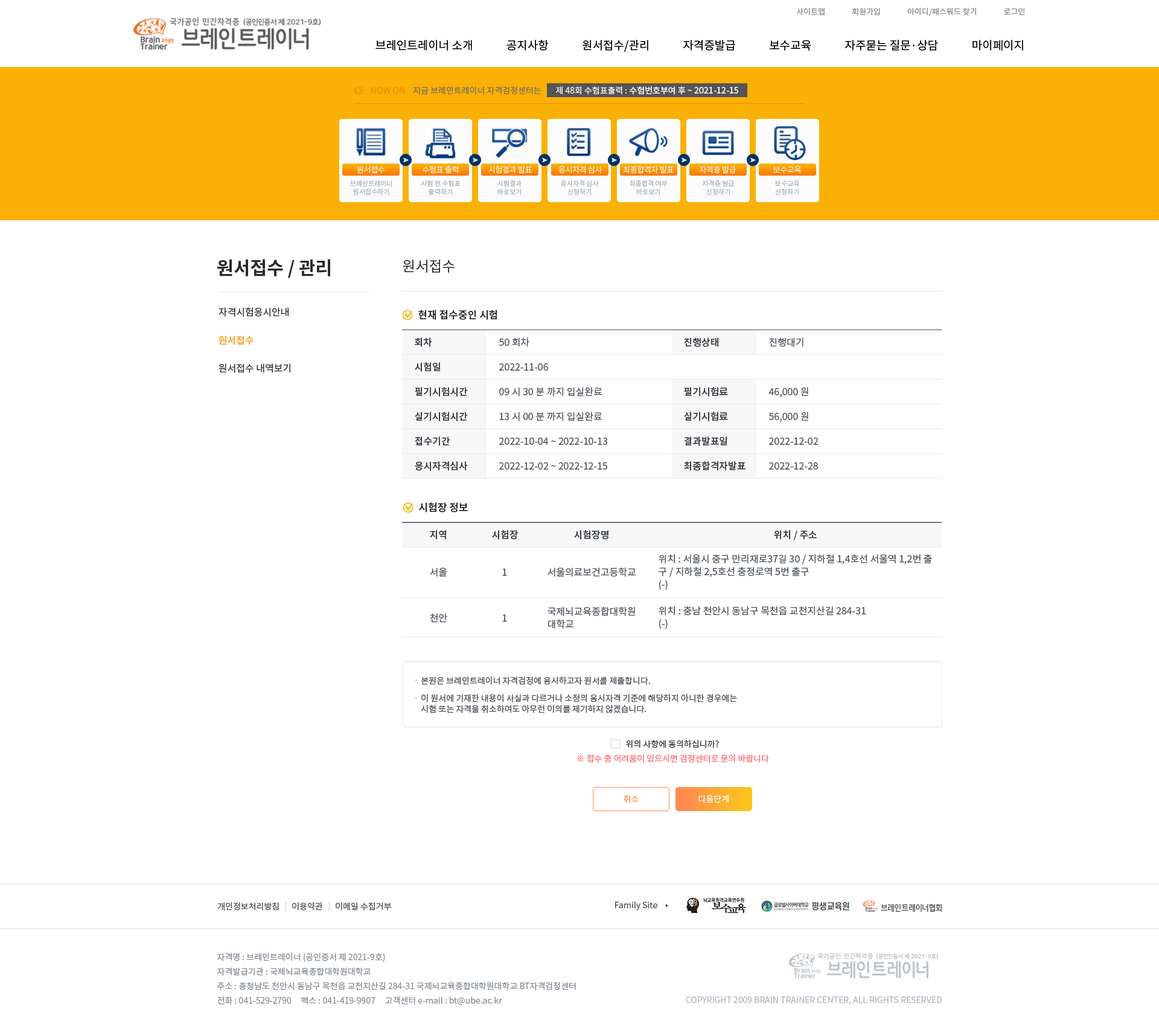
<style>
.page{position:relative;width:1159px;height:1029px;background:#ffffff}
.page>*{position:absolute;margin:0}
.t1{font:7.8px "NotoSansCJKkr-Regular";letter-spacing:0.001em;color:#868e96}
.t2{font:11.5px "NotoSansCJKkr-Regular";color:#000000}
.t3{font:8.4px "NotoSansCJKkr-Regular";color:#f08c00}
.t4{font:8.4px "NotoSansCJKkr-Regular";color:#7c6d5d}
.t5{font:8.4px "NotoSansCJKkr-Medium";color:#f8f8f8}
.t6{font:8.4px "NotoSansCJKkr-Regular";color:#f8f8f8}
.t7{font:7.8px "NotoSansCJKkr-Light";letter-spacing:-0.025em;color:#fcfcfc}
.t8{font:6.6px/8.4px "NotoSansCJKkr-Regular";color:#adb5bd}
.t9{font:18.1px "NotoSansCJKkr-Bold";color:#2b2b2b}
.t10{font:14.5px "NotoSansCJKkr-Regular";color:#2b2b2b}
.t11{font:9.7px "NotoSansCJKkr-Regular";color:#2b2b2b}
.t12{font:10.3px "NotoSansCJKkr-Medium";color:#212529}
.t13{font:9.7px "NotoSansCJKkr-Medium";color:#fd9f27}
.t14{font:9.7px "NotoSansCJKkr-Medium";color:#343a40}
.t15{font:9.7px "NotoSansCJKkr-Regular";color:#495057}
.t16{font:9.7px/12.7px "NotoSansCJKkr-Regular";color:#495057}
.t17{font:8.4px "NotoSansCJKkr-Regular";color:#495057}
.t18{font:9.7px "NotoSansCJKkr-Regular";color:#fd9f27}
.t19{font:8.4px/10.9px "NotoSansCJKkr-Regular";color:#495057}
.t20{font:9.7px/10.9px "NotoSansCJKkr-Regular";color:#fd9f27}
.t21{font:8.4px "NotoSansCJKkr-Regular";color:#343a40;text-transform:uppercase}
.t22{font:8.4px "NotoSansCJKkr-Regular";color:#ff6b6b;text-transform:uppercase}
.t23{font:8.4px "NotoSansCJKkr-Regular";color:#ff8b51}
.t24{font:8.4px "NotoSansCJKkr-Regular";color:#ffffff}
.t25{font:8.4px "NotoSansCJKkr-Regular";color:#ced4da}
.t26{font:8.4px/14.5px "NotoSansCJKkr-Regular";color:#868e96}
.t27{font:8.4px "NotoSansCJKkr-Regular";color:#adb5bd}
</style>
<div class="page">
<p class="t1" style="left:796px;top:7px;width:229px;height:9px">사이트맵               회원가입               아이디/패스워드 찾기               로그인</p>
<p class="t2" style="left:375px;top:39px;width:648px;height:13px">브레인트레이너 소개             공지사항             원서접수/관리             자격증발급             보수교육             자주묻는 질문·상담             마이페이지</p>
<p class="t3" style="left:371px;top:87px;width:33px;height:7px">NOW ON</p>
<p class="t4" style="left:413px;top:86px;width:128px;height:9px">지금 브레인트레이너 자격검정센터는</p>
<p class="t5" style="left:556px;top:86px;width:182px;height:9px"><span class="t6">제 48회 수험표출력 : </span>수험번호부여 후 ~ 2021-12-15</p>
<p class="t7" style="left:357px;top:166px;width:28px;height:8px">원서접수</p>
<p class="t7" style="left:422px;top:165px;width:36px;height:9px">수험표 출력</p>
<p class="t7" style="left:488px;top:165px;width:44px;height:8px">시험결과 발표</p>
<p class="t7" style="left:558px;top:165px;width:44px;height:9px">응시자격 심사</p>
<p class="t7" style="left:623px;top:165px;width:51px;height:9px">최종합격자 발표</p>
<p class="t7" style="left:699px;top:165px;width:37px;height:9px">자격증 발급</p>
<p class="t7" style="left:773px;top:166px;width:28px;height:8px">보수교육</p>
<p class="t8" style="left:350px;top:180px;width:42px;height:16px;text-align:center">브레인트레이너<br>원서접수하기</p>
<p class="t8" style="left:421px;top:180px;width:39px;height:16px;text-align:center">시험 전 수험표<br>출력하기</p>
<p class="t8" style="left:497px;top:180px;width:24px;height:16px;text-align:center">시험결과<br>바로보기</p>
<p class="t8" style="left:561px;top:180px;width:38px;height:16px;text-align:center">응시자격 심사<br>신청하기</p>
<p class="t8" style="left:629px;top:180px;width:39px;height:16px;text-align:center">최종합격 여부<br>바로보기</p>
<p class="t8" style="left:702px;top:180px;width:33px;height:16px;text-align:center">자격증 발급<br>신청하기</p>
<p class="t8" style="left:775px;top:180px;width:25px;height:16px;text-align:center">보수교육<br>신청하기</p>
<p class="t9" style="left:217px;top:259px;width:113px;height:19px">원서접수 / 관리</p>
<p class="t10" style="left:403px;top:260px;width:51px;height:13px">원서접수</p>
<p class="t11" style="left:218px;top:307px;width:70px;height:10px">자격시험응시안내</p>
<p class="t12" style="left:418px;top:310px;width:79px;height:10px">현재 접수중인 시험</p>
<p class="t13" style="left:218px;top:336px;width:35px;height:9px">원서접수</p>
<p class="t14" style="left:415px;top:337px;width:17px;height:10px">회차</p>
<p class="t15" style="left:499px;top:337px;width:30px;height:10px">50 회차</p>
<p class="t14" style="left:684px;top:337px;width:34px;height:10px">진행상태</p>
<p class="t15" style="left:769px;top:337px;width:34px;height:10px">진행대기</p>
<p class="t11" style="left:218px;top:363px;width:72px;height:10px">원서접수 내역보기</p>
<p class="t14" style="left:415px;top:362px;width:26px;height:10px">시험일</p>
<p class="t15" style="left:499px;top:363px;width:49px;height:8px">2022-11-06</p>
<p class="t14" style="left:415px;top:387px;width:53px;height:10px">필기시험시간</p>
<p class="t15" style="left:499px;top:387px;width:103px;height:10px">09 시 30 분 까지 입실완료</p>
<p class="t14" style="left:684px;top:387px;width:44px;height:10px">필기시험료</p>
<p class="t15" style="left:768px;top:387px;width:40px;height:10px">46,000 원</p>
<p class="t14" style="left:415px;top:412px;width:53px;height:9px">실기시험시간</p>
<p class="t15" style="left:499px;top:412px;width:103px;height:9px">13 시 00 분 까지 입실완료</p>
<p class="t14" style="left:684px;top:412px;width:44px;height:9px">실기시험료</p>
<p class="t15" style="left:769px;top:412px;width:39px;height:10px">56,000 원</p>
<p class="t14" style="left:415px;top:436px;width:35px;height:10px">접수기간</p>
<p class="t15" style="left:499px;top:438px;width:108px;height:7px">2022-10-04 ~ 2022-10-13</p>
<p class="t14" style="left:684px;top:436px;width:43px;height:10px">결과발표일</p>
<p class="t15" style="left:769px;top:438px;width:49px;height:7px">2022-12-02</p>
<p class="t14" style="left:415px;top:461px;width:53px;height:10px">응시자격심사</p>
<p class="t14" style="left:684px;top:461px;width:62px;height:10px">최종합격자발표</p>
<p class="t15" style="left:499px;top:462px;width:108px;height:8px">2022-12-02 ~ 2022-12-15</p>
<p class="t15" style="left:769px;top:462px;width:49px;height:8px">2022-12-28</p>
<p class="t12" style="left:419px;top:502px;width:49px;height:10px">시험장 정보</p>
<p class="t14" style="left:430px;top:530px;width:16px;height:10px">지역</p>
<p class="t14" style="left:492px;top:530px;width:26px;height:10px">시험장</p>
<p class="t14" style="left:574px;top:530px;width:34px;height:10px">시험장명</p>
<p class="t14" style="left:774px;top:530px;width:43px;height:10px">위치 / 주소</p>
<p class="t16" style="left:658px;top:554px;width:274px;height:36px">위치 : 서울시 중구 만리재로37길 30 / 지하철 1,4호선 서울역 1,2번 출<br>구 / 지하철 2,5호선 충정로역 5번 출구<br>(-)</p>
<p class="t15" style="left:430px;top:567px;width:17px;height:10px">서울</p>
<p class="t15" style="left:502px;top:569px;width:5px;height:7px">1</p>
<p class="t15" style="left:547px;top:567px;width:89px;height:10px">서울의료보건고등학교</p>
<p class="t16" style="left:658px;top:606px;width:208px;height:23px">위치 : 충남 천안시 동남구 목천읍 교천지산길 284-31<br>(-)</p>
<p class="t15" style="left:430px;top:613px;width:17px;height:9px">천안</p>
<p class="t15" style="left:502px;top:614px;width:5px;height:8px">1</p>
<p class="t16" style="left:547px;top:607px;width:88px;height:22px">국제뇌교육종합대학원<br>대학교</p>
<p class="t17" style="left:415px;top:677px;width:235px;height:8px"><span class="t18">· </span>본원은 브레인트레이너 자격검정에 응시하고자 원서를 제출합니다.</p>
<p class="t19" style="left:415px;top:694px;width:322px;height:19px"><span class="t20">· </span>이 원서에 기재한 내용이 사실과 다르거나 소정의 응시자격 기준에 해당하지 아니한 경우에는<br>    시험 또는 자격을 취소하여도 아무런 이의를 제기하지 않겠습니다.</p>
<p class="t21" style="left:626px;top:740px;width:93px;height:8px">위의 사항에 동의하십니까?</p>
<p class="t22" style="left:577px;top:754px;width:192px;height:9px">※ 접수 중 어려움이 있으시면 검정센터로 문의 바랍니다</p>
<p class="t23" style="left:623px;top:795px;width:16px;height:8px">취소</p>
<p class="t24" style="left:698px;top:795px;width:30px;height:8px">다음단계</p>
<p class="t17" style="left:217px;top:902px;width:62px;height:9px">개인정보처리방침</p>
<p class="t25" style="left:285px;top:902px;width:1px;height:9px">|</p>
<p class="t17" style="left:292px;top:902px;width:31px;height:9px">이용약관</p>
<p class="t25" style="left:328px;top:902px;width:2px;height:9px">|</p>
<p class="t17" style="left:336px;top:902px;width:55px;height:9px">이메일 수집거부</p>
<p class="t17" style="left:615px;top:901px;width:42px;height:9px">Family Site</p>
<p class="t26" style="left:217px;top:953px;width:359px;height:52px">자격명 : 브레인트레이너 (공인증서 제 2021-9호)<br>자격발급기관 : 국제뇌교육종합대학원대학교<br>주소 : 충청남도 천안시 동남구 목천읍 교천지산길 284-31 국제뇌교육종합대학원대학교 BT자격검정센터<br>전화 : 041-529-2790     팩스 : 041-419-9907     고객센터 e-mail : bt@ube.ac.kr</p>
<p class="t27" style="left:686px;top:996px;width:256px;height:9px">COPYRIGHT 2009 BRAIN TRAINER CENTER, ALL RIGHTS RESERVED</p>
</div>
